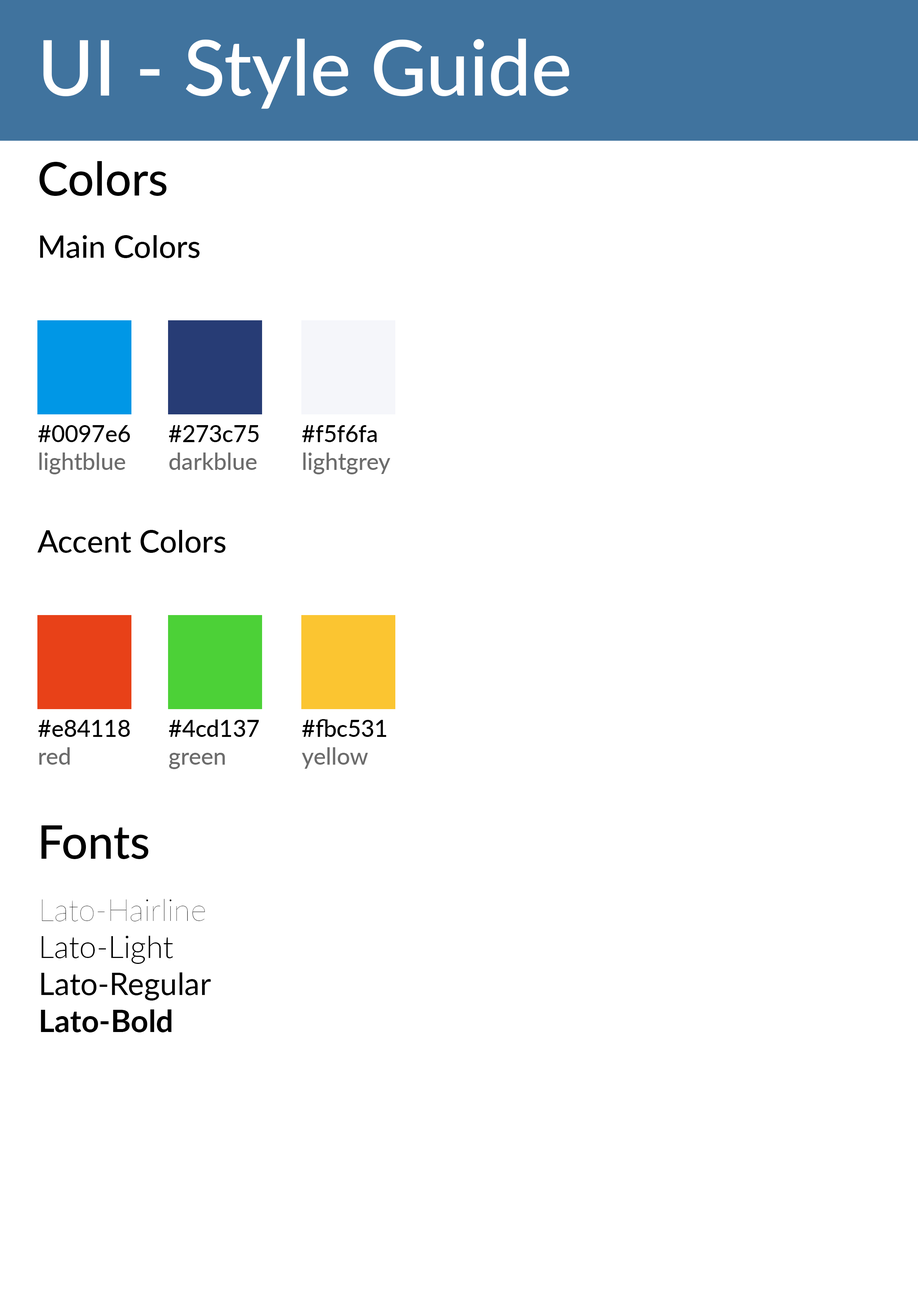
<style>
.page{position:relative;width:918px;height:1299px;background:#ffffff}
.page>*{position:absolute;margin:0}
.t1{font:77.1px "Lato-Medium";color:#ffffff}
.t2{font:46.3px "Lato-Medium";color:#000000}
.t3{font:30.9px "Lato-Medium";color:#000000}
.t4{font:23.1px "Lato-Medium";color:#6c6c6c}
.t5{font:23.1px "Lato-Medium";color:#000000}
.t6{font:30.9px "Lato-Hairline";color:#000000}
.t7{font:30.9px "Lato-Light";color:#000000}
.t8{font:30.9px "Lato-Regular";color:#000000}
.t9{font:30.9px "Lato-Bold";color:#000000}
</style>
<div class="page">
<p class="t1" style="left:43px;top:39px;width:526px;height:70px">UI - Style Guide</p>
<p class="t2" style="left:39px;top:161px;width:128px;height:35px">Colors</p>
<p class="t3" style="left:40px;top:235px;width:160px;height:23px">Main Colors</p>
<p class="t4" style="left:38px;top:425px;width:92px;height:49px"><span class="t5">#0097e6<br></span>lightblue</p>
<p class="t4" style="left:169px;top:425px;width:90px;height:45px"><span class="t5">#273c75<br></span>darkblue</p>
<p class="t4" style="left:302px;top:425px;width:89px;height:49px"><span class="t5">#f5f6fa<br></span>lightgrey</p>
<p class="t3" style="left:37px;top:530px;width:188px;height:23px">Accent Colors</p>
<p class="t5" style="left:38px;top:720px;width:92px;height:45px">#e84118<br><span class="t4">red</span></p>
<p class="t5" style="left:169px;top:719px;width:90px;height:50px">#4cd137<br><span class="t4">green</span></p>
<p class="t5" style="left:302px;top:719px;width:85px;height:50px">#fbc531<br><span class="t4">yellow</span></p>
<p class="t2" style="left:41px;top:825px;width:107px;height:34px">Fonts</p>
<p class="t6" style="left:41px;top:899px;width:170px;height:133px">Lato-Hairline<br><span class="t7">Lato-Light<br></span><span class="t8">Lato-Regular<br></span><span class="t9">Lato-Bold</span></p>
</div>
